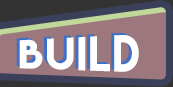
<style>
.page{position:relative;width:173px;height:87px;background:#9d777e}
.page>*{position:absolute;margin:0}
.t1{font:41.3px "LemonMilk";letter-spacing:0.05em;color:#ffffff}
</style>
<div class="page">
<p class="t1" style="left:19px;top:35px;width:120px;height:37px">Build</p>
</div>
